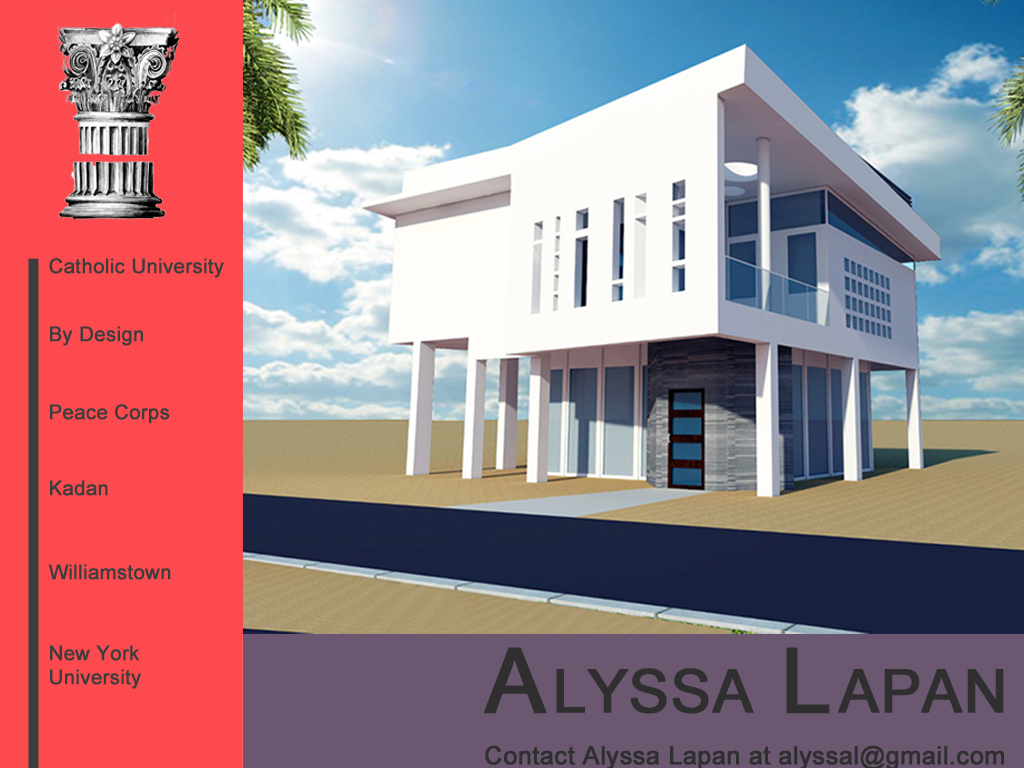
<style>
.page{position:relative;width:1024px;height:768px;background:#fd4a4f}
.page>*{position:absolute;margin:0}
.t1{font:20px "ArialMT";color:#3d3d3d;font-weight:bold}
.t2{font:60px "ArialMT";color:#2f2f2f;font-weight:bold}
.t3{font:90px "ArialMT";color:#2f2f2f;font-weight:bold}
.t4{font:25px "ArialMT";color:#2f2f2f;font-weight:bold}
</style>
<div class="page">
<p class="t1" style="left:49px;top:258px;width:175px;height:20px">Catholic University</p>
<p class="t1" style="left:50px;top:326px;width:93px;height:20px">By Design</p>
<p class="t1" style="left:50px;top:404px;width:120px;height:20px">Peace Corps</p>
<p class="t1" style="left:50px;top:480px;width:58px;height:16px">Kadan</p>
<p class="t1" style="left:48px;top:564px;width:123px;height:16px">Williamstown</p>
<p class="t1" style="left:50px;top:645px;width:91px;height:44px">New York University</p>
<p class="t2" style="left:484px;top:647px;width:520px;height:67px"><span class="t3">A </span>LYSSA <span class="t3">L </span>APAN</p>
<p class="t4" style="left:485px;top:745px;width:519px;height:25px">Contact Alyssa Lapan at alyssal@gmail.com</p>
</div>
